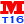
<style>
.page{position:relative;width:24px;height:24px;background:#ffffff}
.page>*{position:absolute;margin:0}
.t1{font:16.4px "BlackoakStd";color:#fc0000;scale:0.67 1}
.t2{font:11px "CopperplateGothic-Bold";color:#0035fc}
</style>
<div class="page">
<p class="t1" style="left:0px;top:1px;width:25px;height:13px">M</p>
<p class="t2" style="left:1px;top:16px;width:23px;height:7px">t16</p>
</div>
